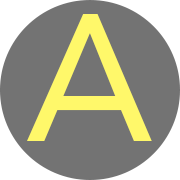
<style>
.page{position:relative;width:180px;height:180px;background:#737373}
.page>*{position:absolute;margin:0}
.t1{font:180px "Avenir-Roman";color:#fff86a}
</style>
<div class="page">
<p class="t1" style="left:27px;top:14px;width:125px;height:127px">A</p>
</div>
